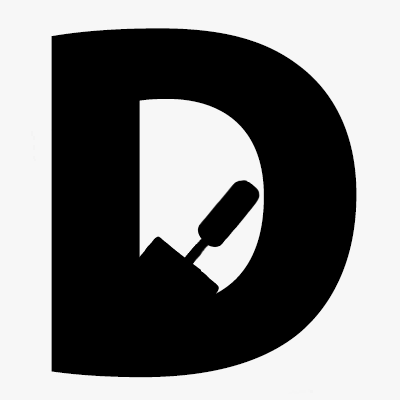
<style>
.page{position:relative;width:400px;height:400px;background:#f7f7f7}
.page>*{position:absolute;margin:0}
.t1{font:489px "MyriadPro-Bold";color:#000000;text-transform:uppercase;font-weight:bold}
</style>
<div class="page">
<p class="t1" style="left:51px;top:28px;width:306px;height:350px">D</p>
</div>
